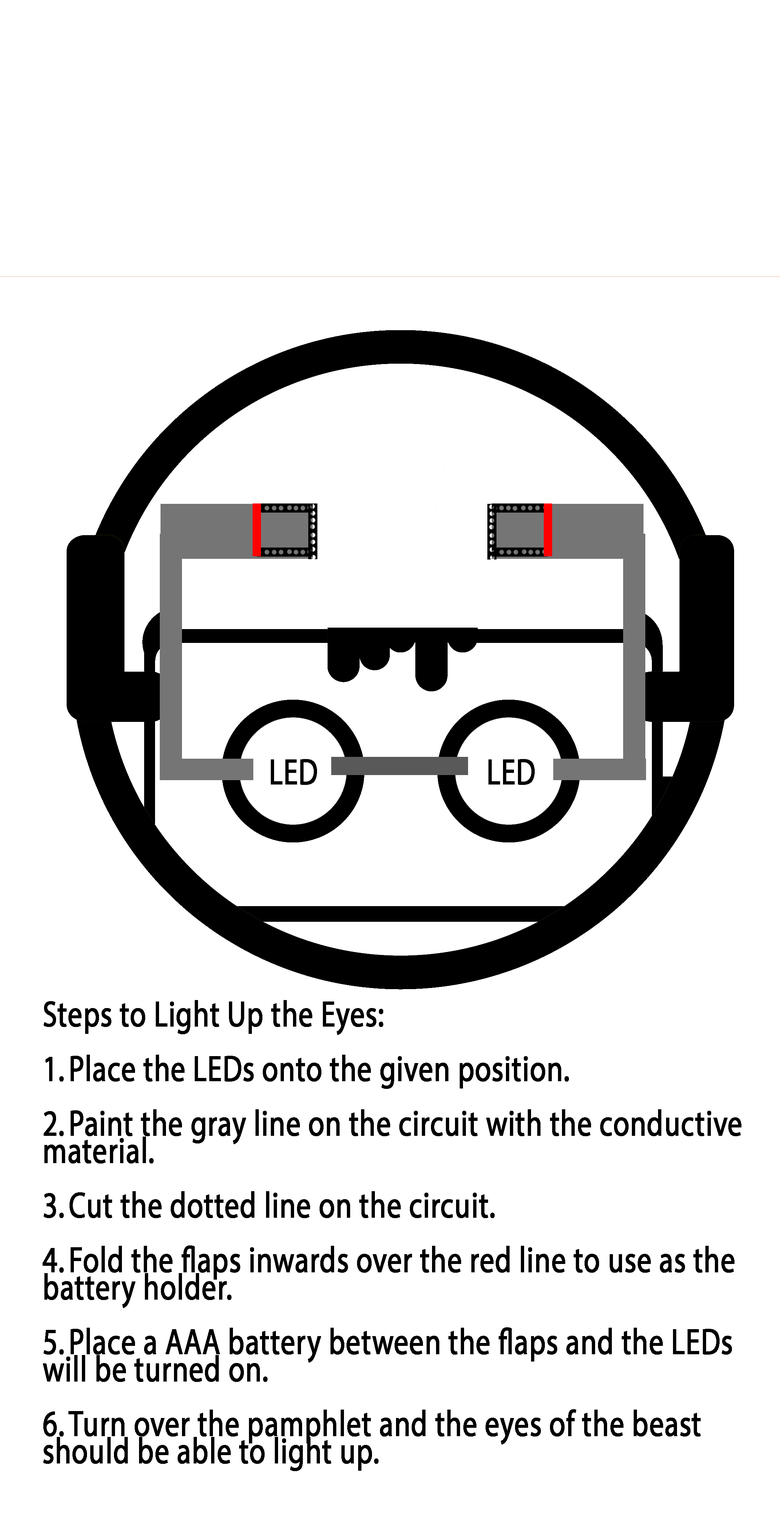
<style>
.page{position:relative;width:780px;height:1529px;background:#ffffff}
.page>*{position:absolute;margin:0}
.t1{font:36.4px "MyriadPro-Regular";color:#000000;font-weight:bold;scale:0.8 1}
.t2{font:36.4px/27.3px "MyriadPro-Regular";color:#000000;font-weight:bold;scale:0.8 1}
</style>
<div class="page">
<p class="t1" style="left:271px;top:759px;width:46px;height:26px">LED</p>
<p class="t1" style="left:488px;top:759px;width:47px;height:26px">LED</p>
<p class="t2" style="left:43px;top:1000px;width:698px;height:471px">Steps to Light Up the Eyes:<br><br>1. Place the LEDs onto the given position.<br><br>2. Paint the gray line on the circuit with the conductive material.<br><br>3. Cut the dotted line on the circuit.<br><br>4. Fold the flaps inwards over the red line to use as the battery holder.<br><br>5. Place a AAA battery between the flaps and the LEDs will be turned on.<br><br>6. Turn over the pamphlet and the eyes of the beast should be able to light up.</p>
</div>
